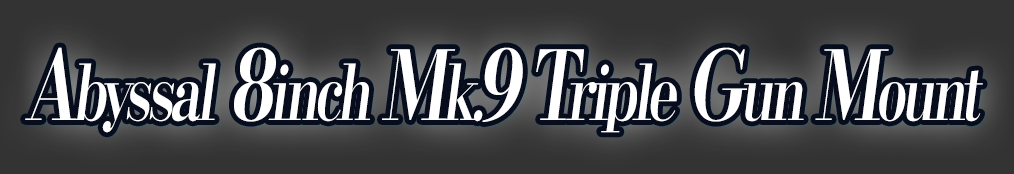
<style>
.page{position:relative;width:1014px;height:174px;background:#333333}
.page>*{position:absolute;margin:0}
.t1{font:76.8px "KochoStd-Heavy";letter-spacing:-0.08em;color:#ffffff;font-style:italic;scale:0.73 1}
.t2{font:96px "KochoStd-Heavy";letter-spacing:-0.08em;color:#ffffff;font-style:italic;scale:0.73 1}
</style>
<div class="page">
<p class="t1" style="left:25px;top:47px;width:958px;height:86px"><span class="t2">A</span>byssal<span class="t2"> 8</span>inch <span class="t2">M</span>k.<span class="t2">9 T</span>riple <span class="t2">G</span>un <span class="t2">M</span>ount</p>
</div>
